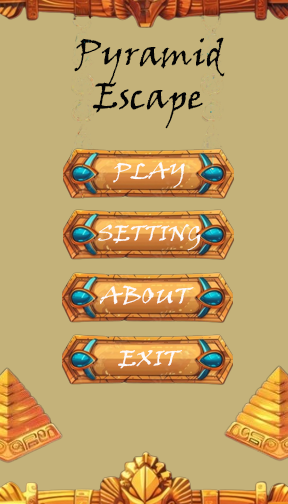
<style>
.page{position:relative;width:288px;height:504px;background:#c4b27a}
.page>*{position:absolute;margin:0}
.t1{font:35.9px "VinerHandITC";color:#040404}
.t2{font:21.4px "VinerHandITC";color:#fcfafa;scale:1.14 1}
.t3{font:21.6px "VinerHandITC";color:#fcfafa;scale:1.11 1}
.t4{font:22.8px "VinerHandITC";color:#fcfafa;scale:1.16 1}
.t5{font:21.6px "VinerHandITC";color:#fcfafa;scale:1.21 1}
</style>
<div class="page">
<p class="t1" style="left:74px;top:37px;width:151px;height:92px;text-align:center">Pyramid<br>Escape</p>
<p class="t2" style="left:113px;top:162px;width:72px;height:26px">PLAY</p>
<p class="t3" style="left:98px;top:224px;width:103px;height:27px">SETTING</p>
<p class="t4" style="left:99px;top:285px;width:95px;height:20px">ABOUT</p>
<p class="t5" style="left:118px;top:350px;width:64px;height:19px">EXIT</p>
</div>
